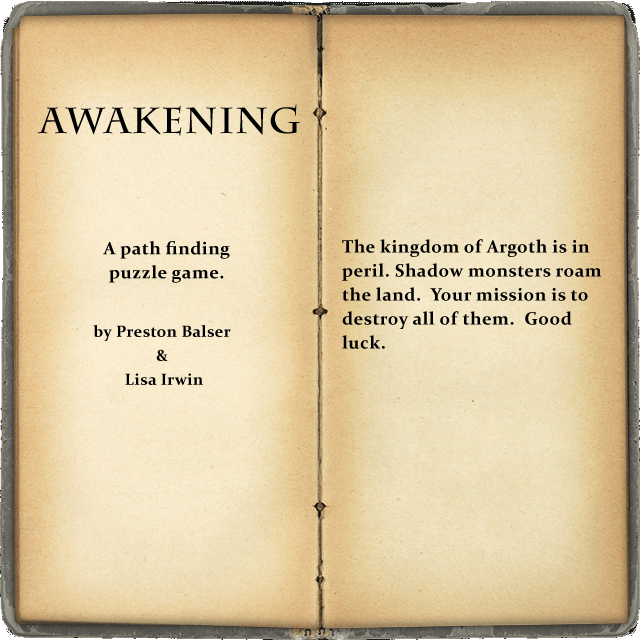
<style>
.page{position:relative;width:640px;height:640px}
.page>*{position:absolute;margin:0}
.t1{font:36px "CharlemagneStd-Bold";letter-spacing:0.025em;color:#000000}
.t2{font:18px/24px "Constantia-Bold";letter-spacing:0.025em;color:#000000}
.t3{font:16px/24px "Constantia-Bold";letter-spacing:0.025em;color:#000000}
</style>
<div class="page">
<p class="t1" style="left:37px;top:104px;width:263px;height:32px">AWAKENING</p>
<p class="t2" style="left:103px;top:241px;width:127px;height:42px;text-align:center">A path finding <br>puzzle game.</p>
<p class="t2" style="left:342px;top:239px;width:260px;height:110px">The kingdom of Argoth is in peril. Shadow monsters roam the land.  Your mission is to <br>destroy all of them.  Good luck.</p>
<p class="t3" style="left:93px;top:325px;width:138px;height:60px;text-align:center">by Preston Balser <br>&amp; <br>Lisa Irwin</p>
</div>
